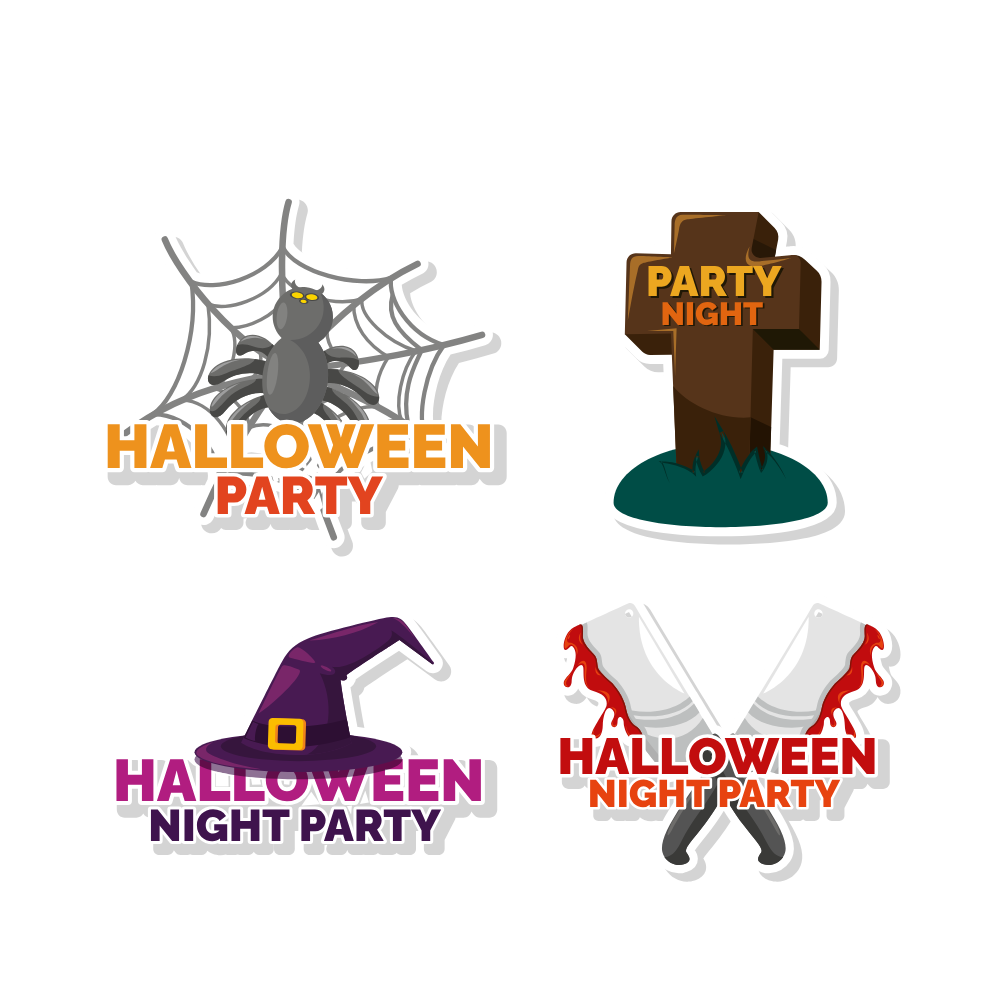
<style>
.page{position:relative;width:1000px;height:1000px;background:#ffffff}
.page>*{position:absolute;margin:0}
.t1{font:42.4px "Raleway-Black";color:#eca720}
.t2{font:32.2px "Raleway-Black";color:#e16510}
.t3{font:61.7px "Raleway-Black"}
.t4{font:61.7px "Raleway-Black";color:#ee921d}
.t5{font:52.7px "Raleway-Black";color:#e2441f}
.t6{font:50.7px "Raleway-Black";color:#c20d0e}
.t7{font:58.8px "Raleway-Black";color:#b11d80}
.t8{font:38.4px "Raleway-Black"}
.t9{font:38.4px "Raleway-Black";color:#e74310}
.t10{font:44.5px "Raleway-Black";color:#3f134d}
</style>
<div class="page">
<p class="t1" style="left:648px;top:265px;width:134px;height:31px">PARTY</p>
<p class="t1" style="left:650px;top:267px;width:134px;height:31px">PARTY</p>
<p class="t2" style="left:662px;top:301px;width:101px;height:25px">NIGHT</p>
<p class="t2" style="left:664px;top:302px;width:101px;height:25px">NIGHT</p>
<p class="t3" style="left:98px;top:414px;width:401px;height:64px">HALLOWEEN</p>
<p class="t4" style="left:107px;top:423px;width:383px;height:46px">HALLOWEEN</p>
<p class="t5" style="left:217px;top:476px;width:167px;height:38px">PARTY</p>
<p class="t6" style="left:560px;top:737px;width:315px;height:38px">HALLOWEEN</p>
<p class="t7" style="left:116px;top:759px;width:365px;height:43px">HALLOWEEN</p>
<p class="t8" style="left:584px;top:773px;width:263px;height:41px">NIGHT PARTY</p>
<p class="t9" style="left:590px;top:779px;width:251px;height:29px">NIGHT PARTY</p>
<p class="t10" style="left:150px;top:809px;width:292px;height:33px">NIGHT PARTY</p>
</div>
